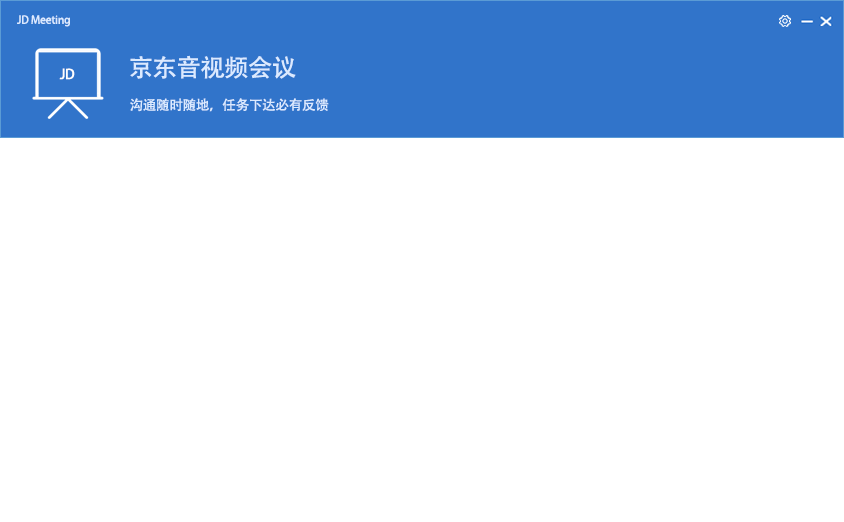
<style>
.page{position:relative;width:844px;height:522px;background:#ffffff}
.page>*{position:absolute;margin:0}
.t1{font:10.8px "AdobeHeitiStd-Regular";letter-spacing:-0.02em;color:#dbeaff}
.t2{font:24.3px "AdobeHeitiStd-Regular";letter-spacing:-0.02em;color:#dbeaff}
.t3{font:13.5px "AdobeHeitiStd-Regular";letter-spacing:-0.02em;color:#fefefe}
.t4{font:13.5px "AdobeHeitiStd-Regular";letter-spacing:-0.02em;color:#dbeaff}
</style>
<div class="page">
<p class="t1" style="left:17px;top:15px;width:53px;height:12px">JD Meeting</p>
<p class="t2" style="left:130px;top:55px;width:166px;height:24px">京东音视频会议</p>
<p class="t3" style="left:59px;top:68px;width:16px;height:12px">JD</p>
<p class="t4" style="left:130px;top:98px;width:199px;height:14px">沟通随时随地，任务下达必有反馈</p>
</div>
